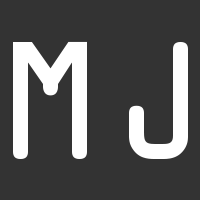
<style>
.page{position:relative;width:200px;height:200px;background:#333333}
.page>*{position:absolute;margin:0}
.t1{font:150px "OCRAStd";color:#ffffff}
</style>
<div class="page">
<p class="t1" style="left:13px;top:41px;width:175px;height:118px">MJ</p>
</div>
